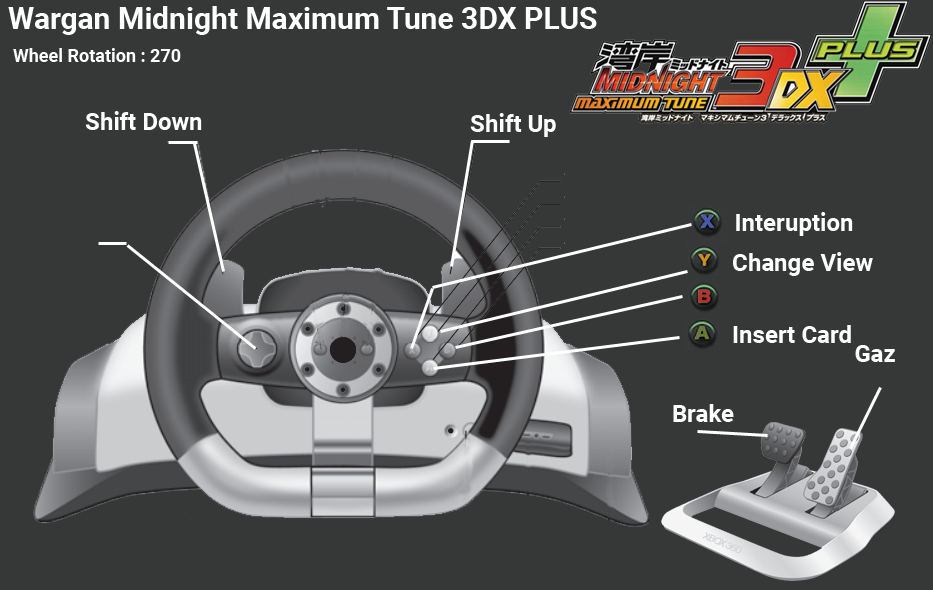
<style>
.page{position:relative;width:933px;height:590px;background:#363838}
.page>*{position:absolute;margin:0}
.t1{font:30px "Roboto-Bold";color:#ffffff}
.t2{font:18px "Roboto-Bold";color:#ffffff}
.t3{font:24px "Roboto-Bold";color:#ffffff}
</style>
<div class="page">
<p class="t1" style="left:8px;top:6px;width:589px;height:29px">Wargan Midnight Maximum Tune 3DX PLUS</p>
<p class="t2" style="left:13px;top:48px;width:168px;height:14px">Wheel Rotation : 270</p>
<p class="t3" style="left:85px;top:111px;width:117px;height:19px">Shift Down</p>
<p class="t3" style="left:470px;top:113px;width:86px;height:24px">Shift Up</p>
<p class="t3" style="left:736px;top:212px;width:117px;height:24px">Interuption</p>
<p class="t3" style="left:733px;top:252px;width:140px;height:24px">Change View</p>
<p class="t3" style="left:733px;top:325px;width:118px;height:18px">Insert Card</p>
<p class="t3" style="left:855px;top:345px;width:40px;height:17px">Gaz</p>
<p class="t3" style="left:673px;top:404px;width:61px;height:18px">Brake</p>
</div>
